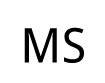
<style>
.page{position:relative;width:105px;height:83px;background:#ffffff}
.page>*{position:absolute;margin:0}
.t1{font:47.9px "DroidSans";color:#000000}
</style>
<div class="page">
<p class="t1" style="left:24px;top:27px;width:60px;height:36px">MS</p>
</div>
